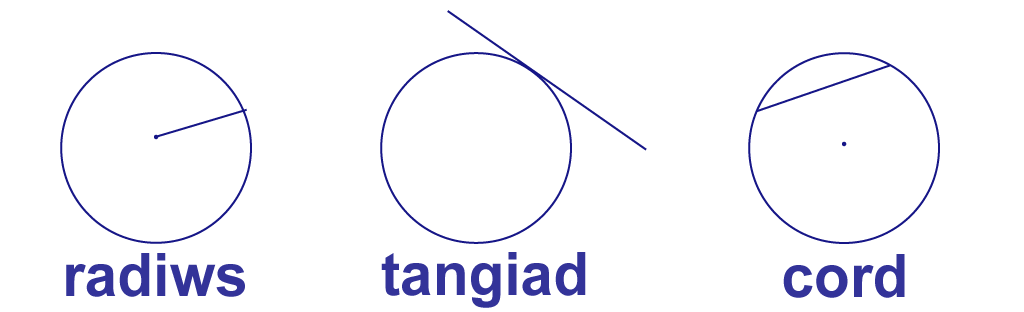
<style>
.page{position:relative;width:1024px;height:312px;background:#ffffff}
.page>*{position:absolute;margin:0}
.t1{font:60px "Arial-BoldMT";color:#333399}
</style>
<div class="page">
<p class="t1" style="left:66px;top:253px;width:179px;height:44px">radiws</p>
<p class="t1" style="left:381px;top:252px;width:205px;height:56px">tangiad</p>
<p class="t1" style="left:783px;top:254px;width:122px;height:44px">cord</p>
</div>
